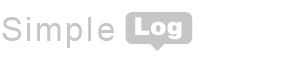
<style>
.page{position:relative;width:300px;height:58px;background:#ffffff}
.page>*{position:absolute;margin:0}
.t1{font:33px "ArialMT";letter-spacing:0.2em;color:#c7c6c6}
.t2{font:24.8px "FZCCHJW--GB1-0";color:#ffffff}
</style>
<div class="page">
<p class="t1" style="left:2px;top:17px;width:112px;height:31px">Simple</p>
<p class="t2" style="left:135px;top:17px;width:47px;height:23px">Log</p>
</div>
